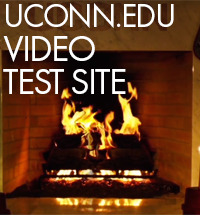
<style>
.page{position:relative;width:200px;height:215px}
.page>*{position:absolute;margin:0}
.t1{font:37.5px/33.3px "FuturaPT-Book";letter-spacing:-0.05em;color:#ffffff;text-transform:uppercase}
.t2{font:41.7px/25px "FuturaPT-Heavy";letter-spacing:-0.1em;color:#ffffff;text-transform:uppercase}
.t3{font:33.3px/33.3px "FuturaPT-Book";letter-spacing:-0.05em;color:#ffffff;text-transform:uppercase}
</style>
<div class="page">
<p class="t1" style="left:3px;top:3px;width:171px;height:91px"><span class="t2"><br><br></span><span class="t3"><br>UCONN.EDU<br></span>VIDEO  <br>TEST SITE</p>
</div>
